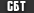
<style>
.page{position:relative;width:34px;height:13px;background:#333333}
.page>*{position:absolute;margin:0}
.t1{font:13.9px "NK_04";color:#ffffff}
</style>
<div class="page">
<p class="t1" style="left:7px;top:1px;width:19px;height:10px">СБТ</p>
</div>
